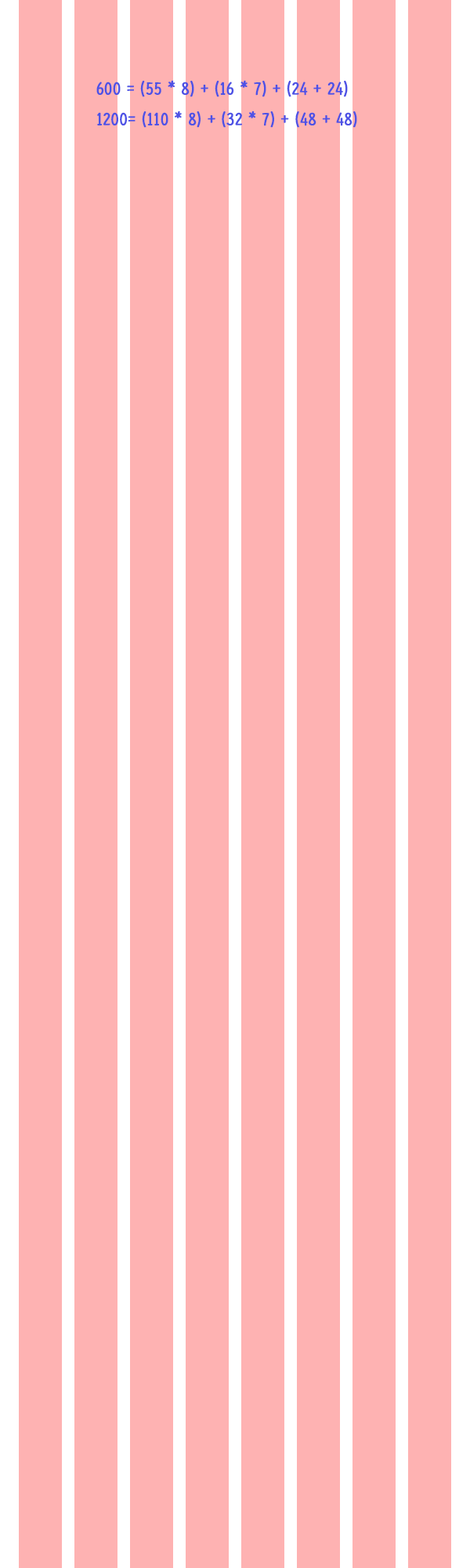
<style>
.page{position:relative;width:470px;height:1568px;background:#feb2b2}
.page>*{position:absolute;margin:0}
.t1{font:18.8px "KoreanEMPJ-B";letter-spacing:-0.05em;color:#4e52e5;font-weight:bold}
</style>
<div class="page">
<p class="t1" style="left:96px;top:80px;width:252px;height:17px">600 = (55 * 8) + (16 * 7) + (24 + 24)</p>
<p class="t1" style="left:97px;top:111px;width:261px;height:17px">1200= (110 * 8) + (32 * 7) + (48 + 48)</p>
</div>
